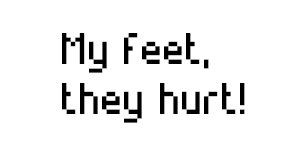
<style>
.page{position:relative;width:300px;height:160px;background:#ffffff}
.page>*{position:absolute;margin:0}
.t1{font:70.8px/50px "Alterebro-Pixel-Font";color:#000000}
</style>
<div class="page">
<p class="t1" style="left:62px;top:33px;width:183px;height:90px">My feet,<br>they hurt!</p>
</div>
